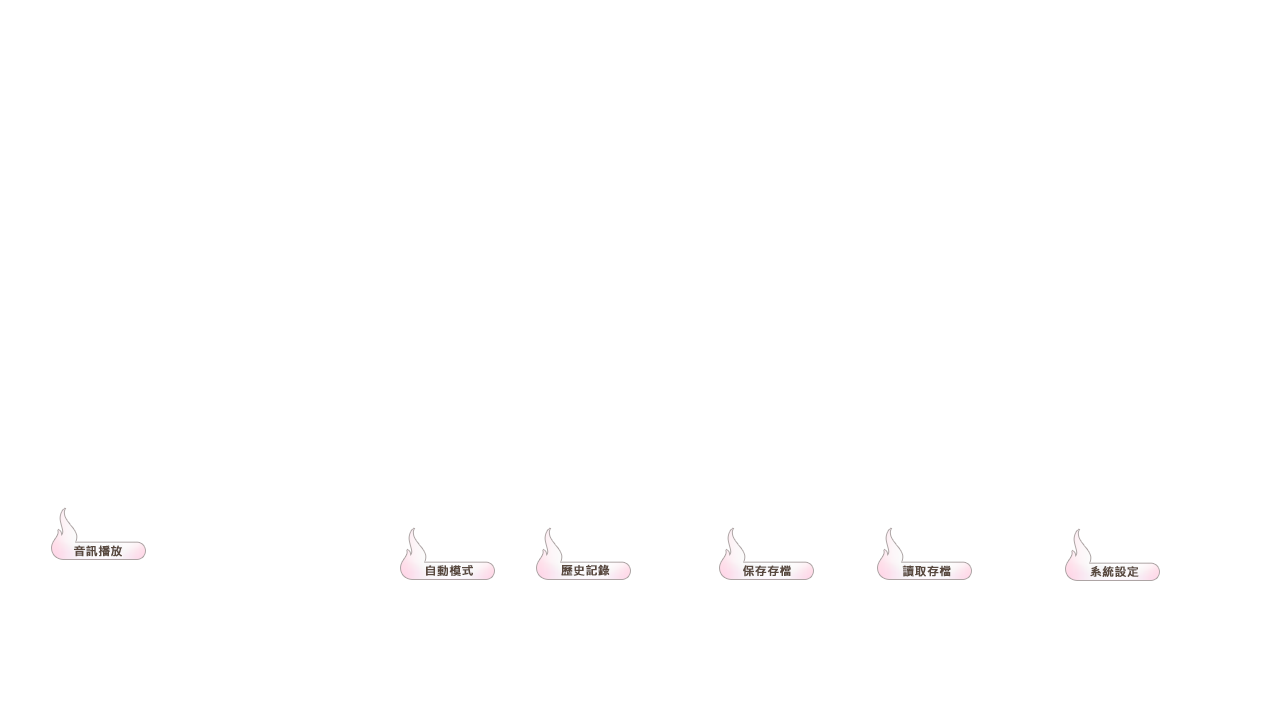
<style>
.page{position:relative;width:1280px;height:720px;background:#ffffff}
.page>*{position:absolute;margin:0}
.t1{font:12px "MicrosoftJhengHeiBold";color:#59493f;font-weight:bold}
</style>
<div class="page">
<p class="t1" style="left:74px;top:545px;width:48px;height:12px">音訊播放</p>
<p class="t1" style="left:426px;top:565px;width:47px;height:11px">自動模式</p>
<p class="t1" style="left:561px;top:564px;width:49px;height:12px">歷史記錄</p>
<p class="t1" style="left:743px;top:565px;width:48px;height:12px">保存存檔</p>
<p class="t1" style="left:902px;top:565px;width:49px;height:12px">讀取存檔</p>
<p class="t1" style="left:1090px;top:566px;width:49px;height:11px">系統設定</p>
</div>
